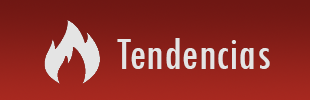
<style>
.page{position:relative;width:310px;height:100px}
.page>*{position:absolute;margin:0}
.t1{font:48px "TwCenMT-Condensed";color:#e4e4e4}
</style>
<div class="page">
<p class="t1" style="left:117px;top:38px;width:153px;height:31px">Tendencias</p>
</div>
